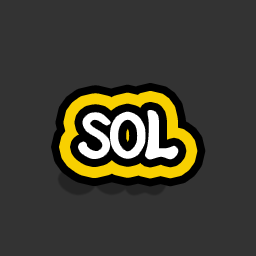
<style>
.page{position:relative;width:256px;height:256px;background:#333333}
.page>*{position:absolute;margin:0}
.t1{font:85.5px "Sans_Soleil";color:#ffffff;scale:1.13 1}
</style>
<div class="page">
<p class="t1" style="left:79px;top:111px;width:99px;height:48px">SOL</p>
</div>
